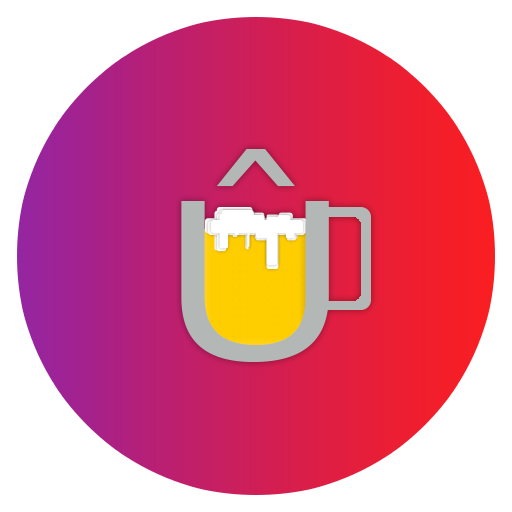
<style>
.page{position:relative;width:512px;height:512px;background:#ffffff}
.page>*{position:absolute;margin:0}
.t1{font:226.2px "SegoeUI";letter-spacing:0.2em;color:#b3b8b7;scale:1.25 1}
</style>
<div class="page">
<p class="t1" style="left:181px;top:149px;width:148px;height:213px">Û</p>
</div>
